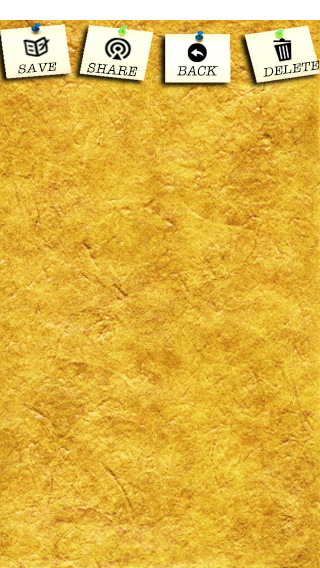
<style>
.page{position:relative;width:320px;height:568px}
.page>*{position:absolute;margin:0}
.t1{font:12.4px "AmericanTypewriter";color:#000000;text-transform:uppercase;font-style:italic;scale:1.13 1}
.t2{font:14px "AmericanTypewriter";color:#000000;text-transform:uppercase;font-style:italic}
.t3{font:12.7px "AmericanTypewriter";color:#000000;text-transform:uppercase;font-style:italic;scale:1.11 1}
</style>
<div class="page">
<p class="t1" style="left:18px;top:62px;width:39px;height:12px;rotate:-4deg">save</p>
<p class="t2" style="left:87px;top:62px;width:51px;height:15px;rotate:5deg">Share</p>
<p class="t2" style="left:177px;top:65px;width:41px;height:11px">back</p>
<p class="t3" style="left:263px;top:60px;width:56px;height:17px;rotate:-8deg">delete</p>
</div>
